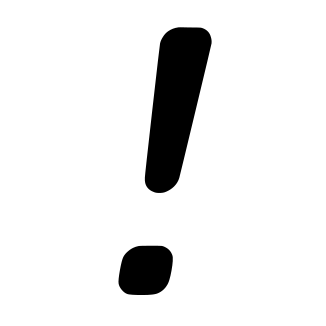
<style>
.page{position:relative;width:326px;height:326px;background:#ffffff}
.page>*{position:absolute;margin:0}
.t1{font:362.2px "OCRAItalic";color:#000000}
</style>
<div class="page">
<p class="t1" style="left:118px;top:27px;width:94px;height:268px">!</p>
</div>
